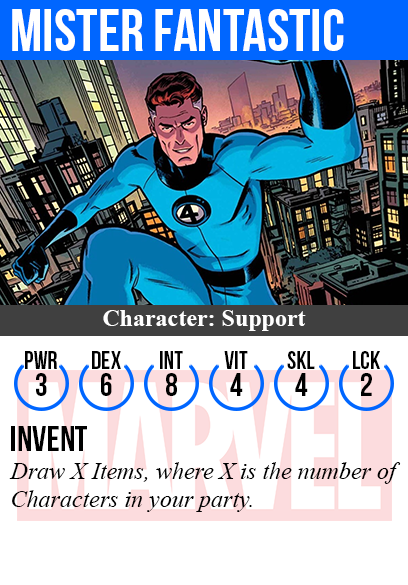
<style>
.page{position:relative;width:408px;height:585px;background:#ffffff}
.page>*{position:absolute;margin:0}
.t1{font:60px "BebasNeue";color:#ffffff}
.t2{font:24px "TimesNewRomanPS-BoldMT";color:#ffffff}
.t3{font:25px "BebasNeue";color:#000000}
.t4{font:32px "BebasNeue";color:#000000}
.t5{font:36px "BebasNeue";color:#000000}
.t6{font:24px "TimesNewRomanPS-ItalicMT";color:#000000}
</style>
<div class="page">
<p class="t1" style="left:12px;top:9px;width:332px;height:42px">mister fantastic</p>
<p class="t2" style="left:103px;top:310px;width:203px;height:21px">Character: Support</p>
<p class="t3" style="left:25px;top:351px;width:32px;height:18px">PWR</p>
<p class="t3" style="left:92px;top:351px;width:29px;height:18px">dex</p>
<p class="t3" style="left:160px;top:351px;width:23px;height:18px">int</p>
<p class="t3" style="left:224px;top:351px;width:24px;height:18px">vit</p>
<p class="t3" style="left:287px;top:351px;width:28px;height:18px">skl</p>
<p class="t3" style="left:353px;top:351px;width:27px;height:18px">lck</p>
<p class="t4" style="left:36px;top:373px;width:11px;height:23px">3</p>
<p class="t4" style="left:101px;top:373px;width:11px;height:23px">6</p>
<p class="t4" style="left:166px;top:373px;width:11px;height:23px">8</p>
<p class="t4" style="left:230px;top:373px;width:13px;height:23px">4</p>
<p class="t4" style="left:295px;top:373px;width:13px;height:23px">4</p>
<p class="t4" style="left:361px;top:373px;width:11px;height:23px">2</p>
<p class="t5" style="left:11px;top:426px;width:76px;height:25px">invent</p>
<p class="t6" style="left:9px;top:462px;width:392px;height:50px">Draw X Items, where X is the number of<br>Characters in your party.</p>
</div>
